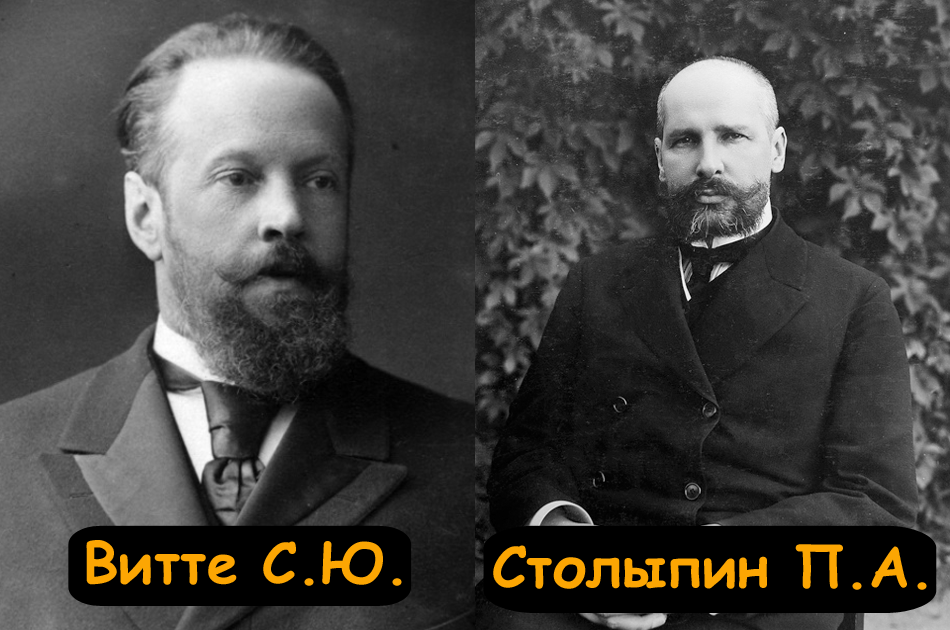
<style>
.page{position:relative;width:950px;height:630px}
.page>*{position:absolute;margin:0}
.t1{font:56px "ComicSansMS-Bold";color:#fca603}
</style>
<div class="page">
<p class="t1" style="left:86px;top:540px;width:316px;height:46px">Витте С.Ю.</p>
<p class="t1" style="left:493px;top:544px;width:434px;height:46px">Столыпин П.А.</p>
</div>
